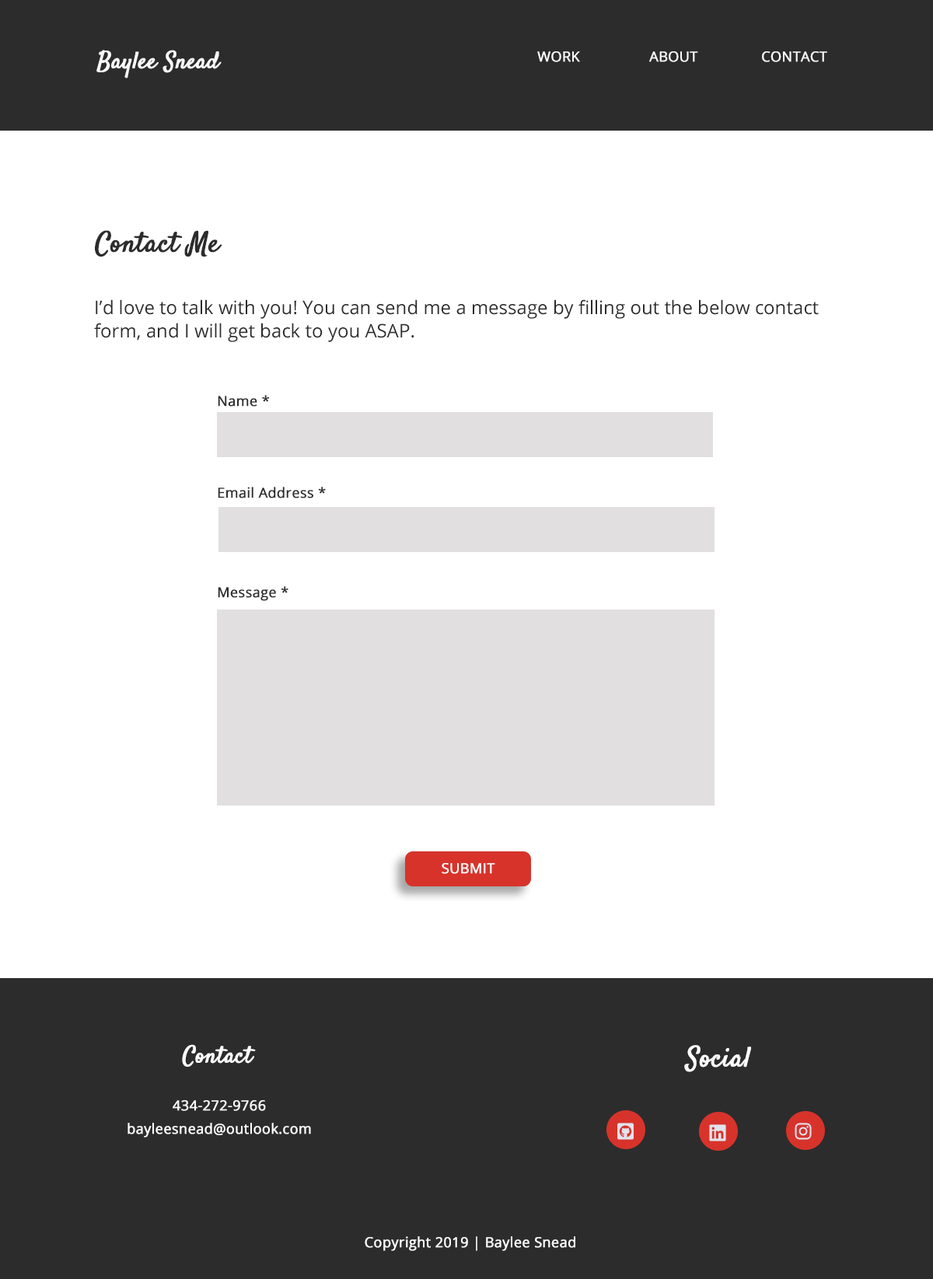
<style>
.page{position:relative;width:933px;height:1279px;background:#ffffff}
.page>*{position:absolute;margin:0}
.t1{font:23.3px "Satisfy-Regular";color:#fbfafa;font-weight:bold}
.t2{font:14px "OpenSans";color:#fbfafa;font-weight:bold}
.t3{font:28px "Satisfy-Regular";color:#2c2c2c;font-weight:bold}
.t4{font:18.7px/23.3px "OpenSans";color:#2c2c2c}
.t5{font:18.7px/37.3px "OpenSans";color:#2c2c2c}
.t6{font:14px "OpenSans";color:#2c2c2c;font-weight:bold}
.t7{font:14px "OpenSans";color:#ffffff;text-transform:uppercase;font-weight:bold}
.t8{font:23.3px "Satisfy-Regular";color:#ffffff;font-weight:bold}
.t9{font:28px "Satisfy-Regular";color:#ffffff;font-weight:bold}
.t10{font:14px/23.3px "OpenSans";color:#ffffff;font-weight:bold}
.t11{font:14px "OpenSans";color:#ffffff;font-weight:bold}
</style>
<div class="page">
<p class="t1" style="left:96px;top:50px;width:126px;height:28px">Baylee Snead</p>
<p class="t2" style="left:537px;top:51px;width:290px;height:11px">WORK   ABOUT   CONTACT</p>
<p class="t3" style="left:95px;top:230px;width:127px;height:26px">Contact Me</p>
<p class="t4" style="left:94px;top:299px;width:724px;height:43px"><span class="t5">I’d</span> love to talk with you! You can send me a message by filling out the below contact form, and I will get back to you ASAP.</p>
<p class="t6" style="left:218px;top:395px;width:52px;height:11px">Name *</p>
<p class="t6" style="left:218px;top:487px;width:108px;height:11px">Email Address *</p>
<p class="t6" style="left:218px;top:586px;width:70px;height:15px">Message *</p>
<p class="t7" style="left:441px;top:863px;width:54px;height:11px">Submit</p>
<p class="t8" style="left:182px;top:1044px;width:74px;height:22px">Contact</p>
<p class="t9" style="left:684px;top:1045px;width:67px;height:27px">Social</p>
<p class="t10" style="left:127px;top:1100px;width:184px;height:37px;text-align:center">434-272-9766<br>bayleesnead@outlook.com</p>
<p class="t11" style="left:365px;top:1236px;width:210px;height:15px">Copyright 2019 | Baylee Snead</p>
</div>
